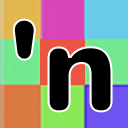
<style>
.page{position:relative;width:128px;height:128px}
.page>*{position:absolute;margin:0}
.t1{font:128.3px "Nunito-Black";color:#000000}
</style>
<div class="page">
<p class="t1" style="left:12px;top:18px;width:101px;height:95px">'n</p>
</div>
